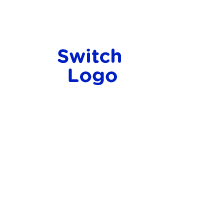
<style>
.page{position:relative;width:200px;height:200px;background:#ffffff}
.page>*{position:absolute;margin:0}
.t1{font:19.2px/19.2px "GothamRounded-Bold";color:#001fc2}
</style>
<div class="page">
<p class="t1" style="left:57px;top:48px;width:64px;height:37px;text-align:center">Switch <br>Logo</p>
</div>
